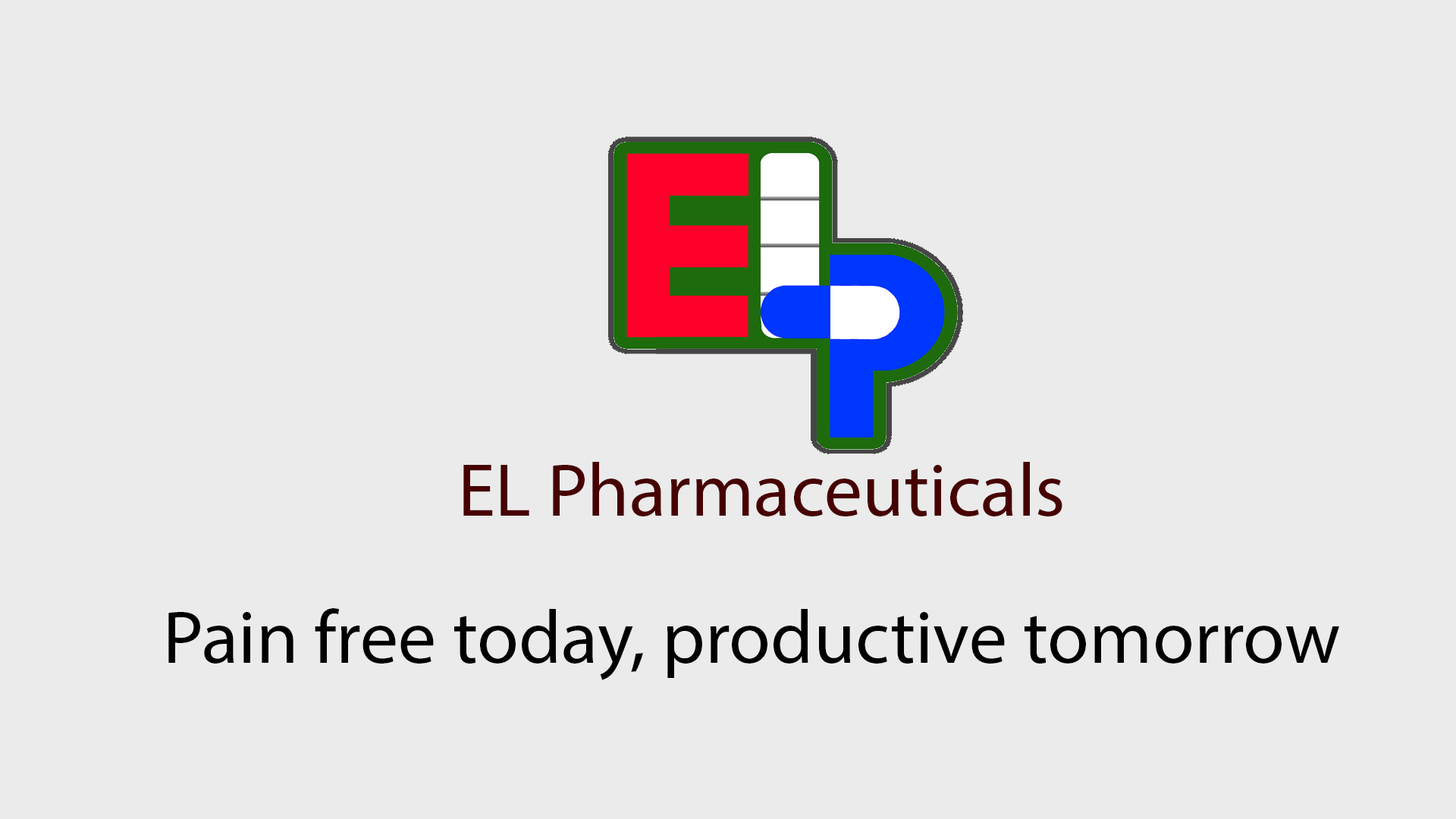
<style>
.page{position:relative;width:1456px;height:819px;background:#ebebeb}
.page>*{position:absolute;margin:0}
.t1{font:75.8px "MyriadPro-Regular";color:#470000}
.t2{font:75.8px "MyriadPro-Regular";color:#000000}
</style>
<div class="page">
<p class="t1" style="left:463px;top:462px;width:599px;height:54px">EL Pharmaceuticals</p>
<p class="t2" style="left:168px;top:608px;width:1171px;height:72px">Pain free today, productive tomorrow</p>
</div>
